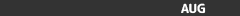
<style>
.page{position:relative;width:240px;height:16px;background:#333333}
.page>*{position:absolute;margin:0}
.t1{font:12.5px "RoundedMplus1c-ExtraBold";color:#ffffff}
</style>
<div class="page">
<p class="t1" style="left:181px;top:3px;width:25px;height:11px">AUG</p>
</div>
